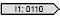
<style>
.page{position:relative;width:60px;height:19px;background:#ffffff}
.page>*{position:absolute;margin:0}
.t1{font:8px "ArialMT";color:#000000;font-variant:small-caps}
</style>
<div class="page">
<p class="t1" style="left:15px;top:6px;width:28px;height:6px">I1: 0110</p>
</div>
